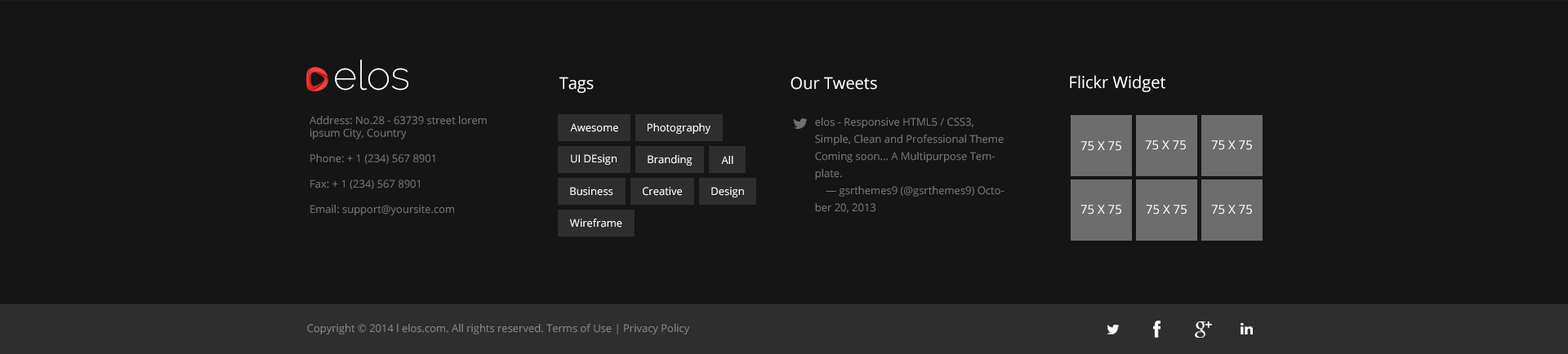
<style>
.page{position:relative;width:1568px;height:354px;background:#151515}
.page>*{position:absolute;margin:0}
.t1{font:40.8px "Raleway-ExtraLight";color:#ffffff}
.t2{font:16.3px "OpenSans";color:#ffffff}
.t3{font:10.6px "OpenSans";color:#737272}
.t4{font:10.6px "OpenSans";color:#ffffff}
.t5{font:10.6px/17.1px "OpenSans";color:#737373}
.t6{font:12.2px "OpenSans";color:#ffffff}
.t7{font:10.6px "OpenSans";color:#858585}
</style>
<div class="page">
<p class="t1" style="left:335px;top:60px;width:73px;height:31px">elos</p>
<p class="t2" style="left:559px;top:77px;width:35px;height:16px">Tags</p>
<p class="t2" style="left:791px;top:77px;width:86px;height:13px">Our Tweets</p>
<p class="t2" style="left:1070px;top:75px;width:95px;height:17px">Flickr Widget</p>
<p class="t3" style="left:310px;top:116px;width:177px;height:100px">Address: No.28 - 63739 street lorem ipsum City, Country<br><br>Phone: + 1 (234) 567 8901<br><br>Fax: + 1 (234) 567 8901<br><br>Email: support@yoursite.com</p>
<p class="t4" style="left:570px;top:123px;width:48px;height:9px">Awesome</p>
<p class="t4" style="left:648px;top:123px;width:62px;height:11px">Photography</p>
<p class="t5" style="left:815px;top:118px;width:189px;height:95px">elos - Responsive HTML5 / CSS3, Simple, Clean and Professional Theme Coming soon... A Multipurpose Template.<br>    — gsrthemes9 (@gsrthemes9) October 20, 2013</p>
<p class="t6" style="left:1080px;top:141px;width:41px;height:10px">75 X 75</p>
<p class="t6" style="left:1145px;top:140px;width:41px;height:10px">75 X 75</p>
<p class="t6" style="left:1211px;top:140px;width:41px;height:10px">75 X 75</p>
<p class="t4" style="left:571px;top:154px;width:46px;height:11px">UI DEsign</p>
<p class="t4" style="left:648px;top:155px;width:45px;height:11px">Branding</p>
<p class="t4" style="left:721px;top:156px;width:12px;height:8px">All</p>
<p class="t4" style="left:570px;top:187px;width:43px;height:9px">Business</p>
<p class="t4" style="left:643px;top:187px;width:39px;height:9px">Creative</p>
<p class="t4" style="left:711px;top:187px;width:33px;height:11px">Design</p>
<p class="t6" style="left:1080px;top:205px;width:41px;height:10px">75 X 75</p>
<p class="t6" style="left:1146px;top:205px;width:41px;height:10px">75 X 75</p>
<p class="t6" style="left:1211px;top:205px;width:41px;height:10px">75 X 75</p>
<p class="t4" style="left:570px;top:219px;width:52px;height:9px">Wireframe</p>
<p class="t7" style="left:307px;top:324px;width:383px;height:11px">Copyright © 2014 l elos.com. All rights reserved. Terms of Use | Privacy Policy</p>
</div>
